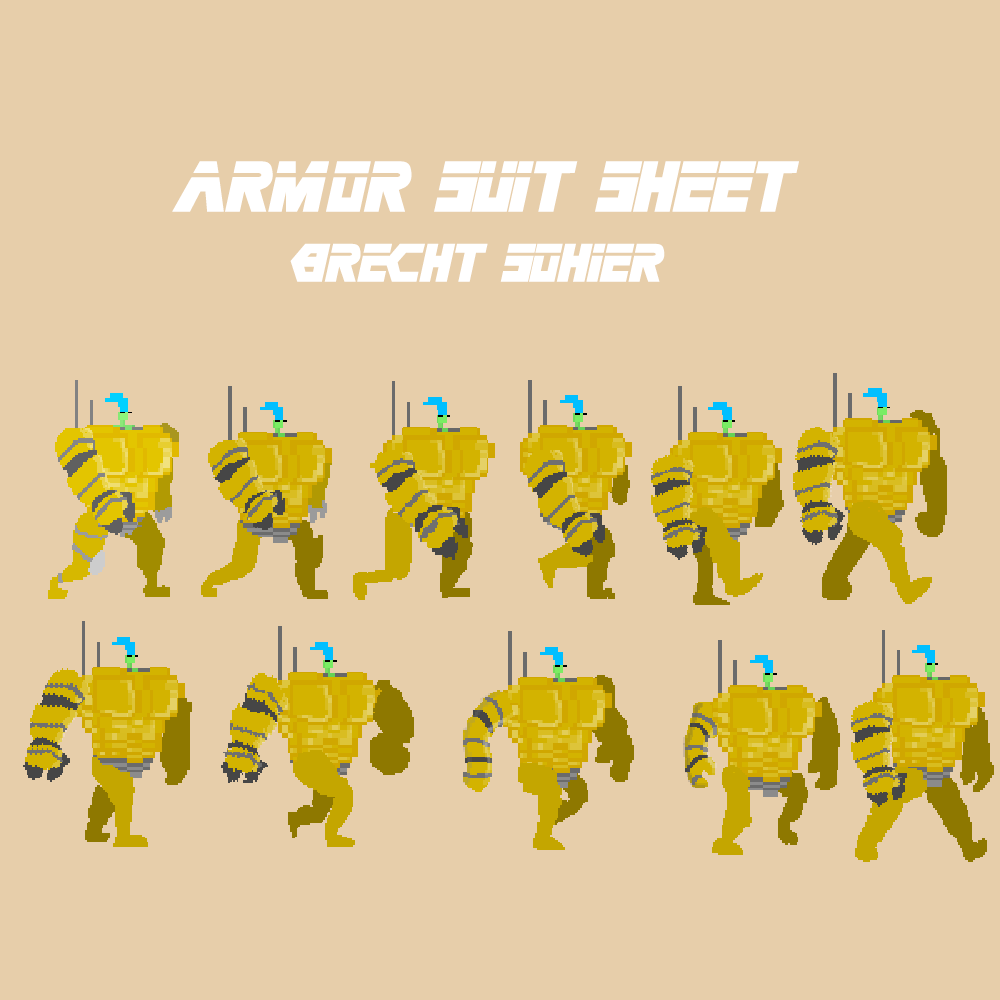
<style>
.page{position:relative;width:1000px;height:1000px;background:#e7ceaa}
.page>*{position:absolute;margin:0}
.t1{font:55.6px "MetalGear";color:#ffffff}
.t2{font:41.7px "MetalGear";color:#ffffff}
</style>
<div class="page">
<p class="t1" style="left:172px;top:161px;width:627px;height:51px">armor suit sheet</p>
<p class="t2" style="left:290px;top:243px;width:375px;height:39px">brecht sohier</p>
</div>
